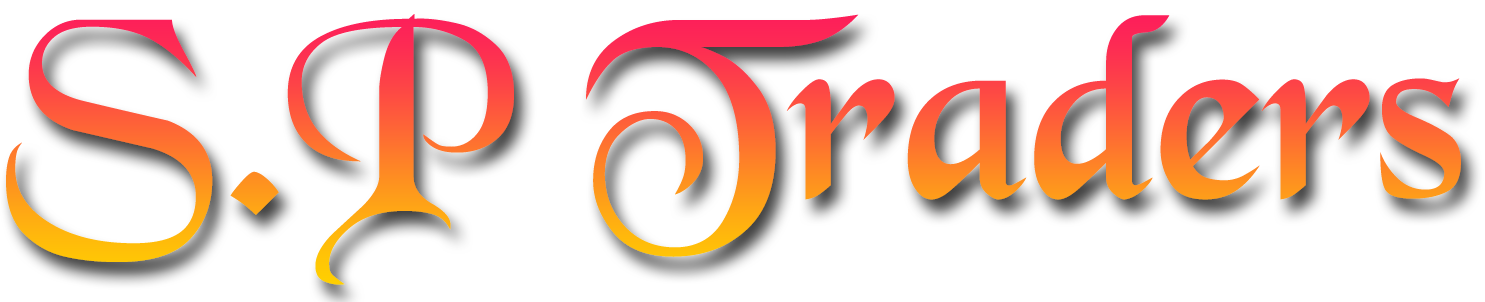
<style>
.page{position:relative;width:1485px;height:302px;background:#ffffff}
.page>*{position:absolute;margin:0}
.t1{font:273.7px "BlackChancery"}
</style>
<div class="page">
<p class="t1" style="left:6px;top:14px;width:1455px;height:271px">S.P Traders</p>
</div>
